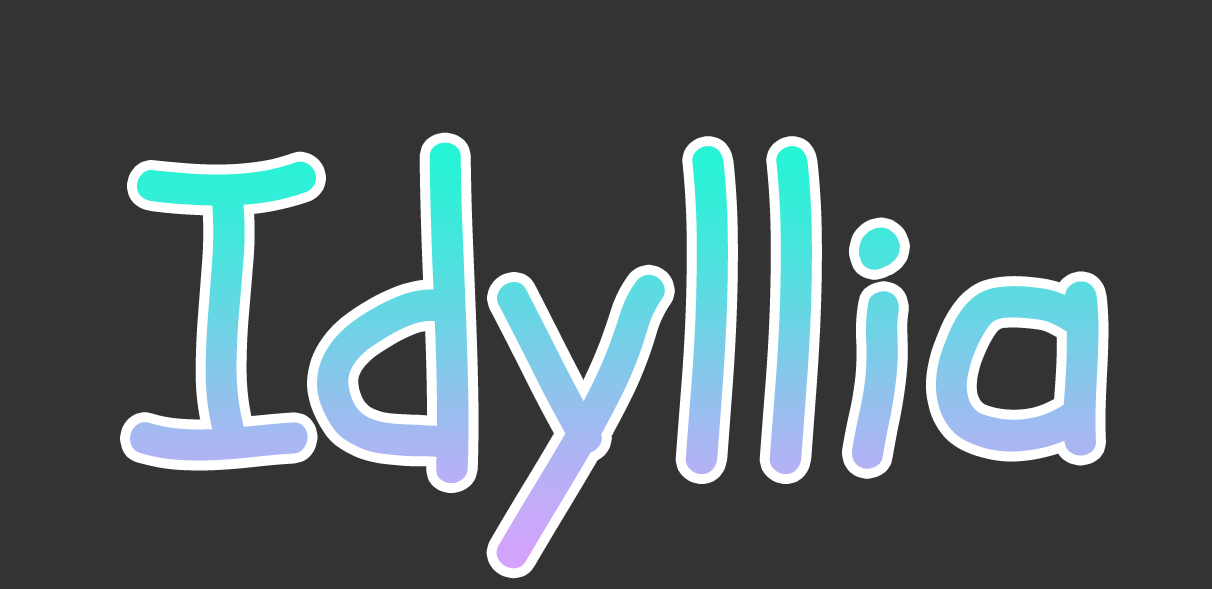
<style>
.page{position:relative;width:1212px;height:589px;background:#333333}
.page>*{position:absolute;margin:0}
.t1{font:400px "Schoolbell-Regular"}
</style>
<div class="page">
<p class="t1" style="left:130px;top:142px;width:969px;height:427px">Idyllia</p>
</div>
